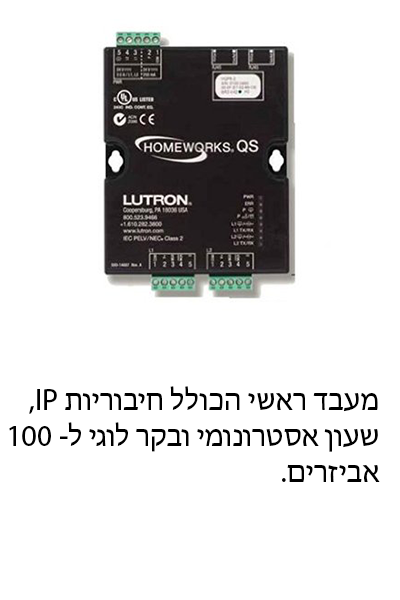
<style>
.page{position:relative;width:400px;height:600px;background:#ffffff}
.page>*{position:absolute;margin:0}
.t1{font:30px "MyriadHebrew-Regular";color:#000000}
</style>
<div class="page">
<p class="t1" style="left:9px;top:386px;width:371px;height:96px;text-align:right">,IP מעבד ראשי הכולל חיבוריות<br>שעון אסטרונומי ובקר לוגי ל- 100<br>.אביזרים</p>
</div>
